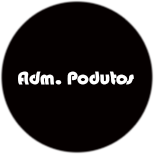
<style>
.page{position:relative;width:154px;height:157px;background:#050000}
.page>*{position:absolute;margin:0}
.t1{font:18px "Bauhaus93";color:#ffffff}
</style>
<div class="page">
<p class="t1" style="left:18px;top:71px;width:116px;height:14px">Adm. Podutos</p>
</div>
